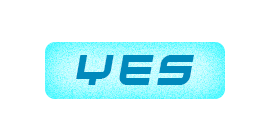
<style>
.page{position:relative;width:280px;height:140px;background:#ffffff}
.page>*{position:absolute;margin:0}
.t1{font:41.7px "UnitedKingdom";letter-spacing:0.13em;color:#0089bc;font-style:italic}
</style>
<div class="page">
<p class="t1" style="left:76px;top:55px;width:118px;height:30px">Yes</p>
</div>
